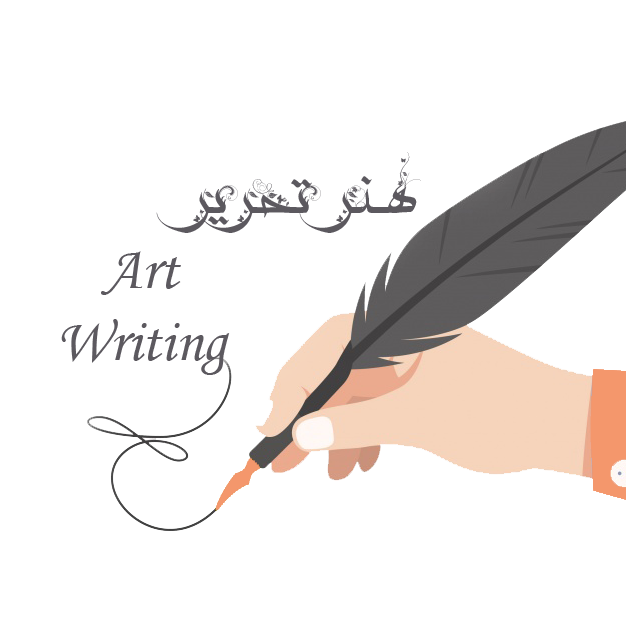
<style>
.page{position:relative;width:626px;height:626px;background:#ffffff}
.page>*{position:absolute;margin:0}
.t1{font:72px "AGoldan";color:#5c595f}
.t2{font:60px "MonotypeCorsiva";color:#5c595f}
</style>
<div class="page">
<p class="t1" style="left:156px;top:152px;width:265px;height:81px">هنر تحریر</p>
<p class="t2" style="left:61px;top:251px;width:169px;height:124px;text-align:center">Art <br>Writing</p>
</div>
